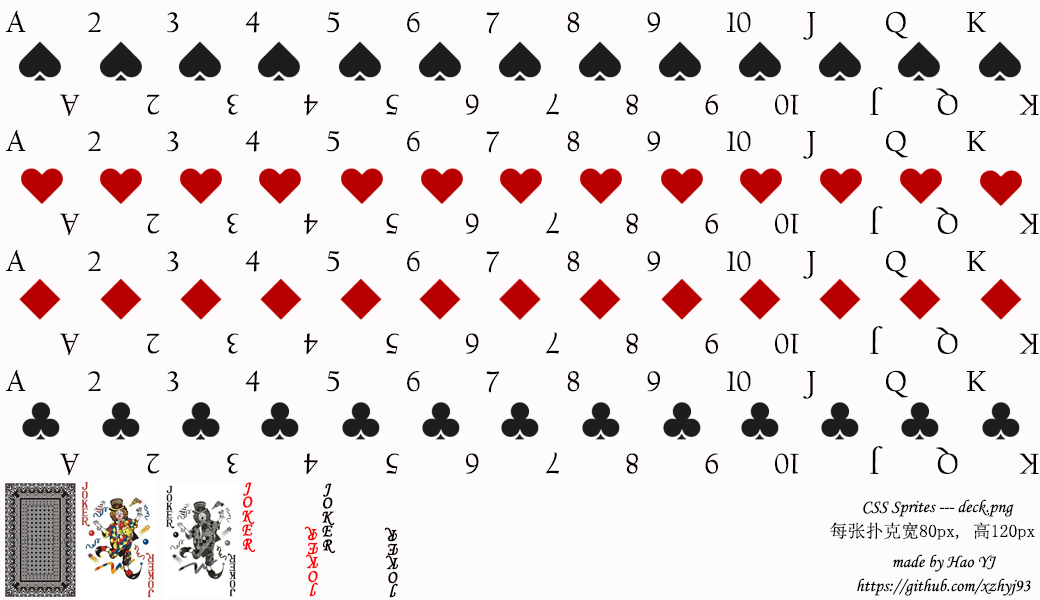
<style>
.page{position:relative;width:1040px;height:600px;background:#fefbfc}
.page>*{position:absolute;margin:0}
.t1{font:30px "CalifornianFB-Reg";color:#050000}
.t2{font:60px "Calibri-Light";color:#fefbfb}
.t3{font:18px/14px "MonotypeCorsiva";color:#fb020d;font-weight:bold;scale:0.89 1}
.t4{font:18px/14px "MonotypeCorsiva";color:#050000;font-weight:bold;scale:0.89 1}
.t5{font:17.9px/24px "MonotypeCorsiva";color:#000000}
.t6{font:17.9px/24px "SimSun";color:#000000}
.t7{font:18px/14px "MonotypeCorsiva";color:#fd0404;font-weight:bold;scale:0.89 1}
</style>
<div class="page">
<p class="t1" style="left:870px;top:87px;width:13px;height:28px;rotate:-179deg">J</p>
<p class="t1" style="left:936px;top:88px;width:22px;height:27px;rotate:-179deg">Q</p>
<p class="t1" style="left:60px;top:94px;width:20px;height:22px;rotate:-179deg">A</p>
<p class="t1" style="left:146px;top:94px;width:14px;height:21px;rotate:-179deg">2</p>
<p class="t1" style="left:227px;top:94px;width:12px;height:21px;rotate:-179deg">3</p>
<p class="t1" style="left:303px;top:94px;width:15px;height:22px;rotate:-179deg">4</p>
<p class="t1" style="left:386px;top:94px;width:13px;height:21px;rotate:-179deg">5</p>
<p class="t1" style="left:466px;top:94px;width:13px;height:21px;rotate:-179deg">6</p>
<p class="t1" style="left:546px;top:93px;width:13px;height:22px;rotate:-179deg">7</p>
<p class="t1" style="left:626px;top:94px;width:12px;height:21px;rotate:-179deg">8</p>
<p class="t1" style="left:705px;top:94px;width:13px;height:21px;rotate:-179deg">9</p>
<p class="t1" style="left:775px;top:94px;width:24px;height:21px;rotate:-179deg">10</p>
<p class="t1" style="left:1019px;top:94px;width:20px;height:21px;rotate:-179deg">K</p>
<p class="t1" style="left:886px;top:130px;width:32px;height:98px">Q<br><span class="t2">A</span></p>
<p class="t1" style="left:870px;top:206px;width:13px;height:28px;rotate:-179deg">J</p>
<p class="t1" style="left:936px;top:207px;width:22px;height:27px;rotate:-179deg">Q</p>
<p class="t1" style="left:60px;top:213px;width:20px;height:22px;rotate:-179deg">A</p>
<p class="t1" style="left:146px;top:213px;width:14px;height:21px;rotate:-179deg">2</p>
<p class="t1" style="left:227px;top:213px;width:12px;height:21px;rotate:-179deg">3</p>
<p class="t1" style="left:303px;top:213px;width:15px;height:22px;rotate:-179deg">4</p>
<p class="t1" style="left:386px;top:213px;width:13px;height:21px;rotate:-179deg">5</p>
<p class="t1" style="left:466px;top:213px;width:13px;height:21px;rotate:-179deg">6</p>
<p class="t1" style="left:546px;top:212px;width:13px;height:22px;rotate:-179deg">7</p>
<p class="t1" style="left:626px;top:213px;width:12px;height:21px;rotate:-179deg">8</p>
<p class="t1" style="left:705px;top:213px;width:13px;height:21px;rotate:-179deg">9</p>
<p class="t1" style="left:775px;top:213px;width:24px;height:21px;rotate:-179deg">10</p>
<p class="t1" style="left:1019px;top:213px;width:20px;height:21px;rotate:-179deg">K</p>
<p class="t1" style="left:727px;top:251px;width:32px;height:97px">10<br><span class="t2">A</span></p>
<p class="t1" style="left:886px;top:250px;width:32px;height:98px">Q<br><span class="t2">A</span></p>
<p class="t1" style="left:966px;top:251px;width:33px;height:97px">K<br><span class="t2">A</span></p>
<p class="t1" style="left:870px;top:326px;width:13px;height:28px;rotate:-179deg">J</p>
<p class="t1" style="left:936px;top:327px;width:22px;height:27px;rotate:-179deg">Q</p>
<p class="t1" style="left:60px;top:333px;width:20px;height:22px;rotate:-179deg">A</p>
<p class="t1" style="left:146px;top:333px;width:14px;height:21px;rotate:-179deg">2</p>
<p class="t1" style="left:227px;top:333px;width:12px;height:21px;rotate:-179deg">3</p>
<p class="t1" style="left:303px;top:333px;width:15px;height:22px;rotate:-179deg">4</p>
<p class="t1" style="left:386px;top:333px;width:13px;height:21px;rotate:-179deg">5</p>
<p class="t1" style="left:466px;top:333px;width:13px;height:21px;rotate:-179deg">6</p>
<p class="t1" style="left:546px;top:332px;width:13px;height:22px;rotate:-179deg">7</p>
<p class="t1" style="left:626px;top:333px;width:12px;height:21px;rotate:-179deg">8</p>
<p class="t1" style="left:705px;top:333px;width:13px;height:21px;rotate:-179deg">9</p>
<p class="t1" style="left:775px;top:333px;width:24px;height:21px;rotate:-179deg">10</p>
<p class="t1" style="left:1019px;top:333px;width:20px;height:21px;rotate:-179deg">K</p>
<p class="t1" style="left:870px;top:446px;width:13px;height:28px;rotate:-179deg">J</p>
<p class="t1" style="left:936px;top:447px;width:22px;height:27px;rotate:-179deg">Q</p>
<p class="t1" style="left:60px;top:453px;width:20px;height:22px;rotate:-179deg">A</p>
<p class="t1" style="left:146px;top:453px;width:14px;height:21px;rotate:-179deg">2</p>
<p class="t1" style="left:227px;top:453px;width:12px;height:21px;rotate:-179deg">3</p>
<p class="t1" style="left:303px;top:453px;width:15px;height:22px;rotate:-179deg">4</p>
<p class="t1" style="left:386px;top:453px;width:13px;height:21px;rotate:-179deg">5</p>
<p class="t1" style="left:466px;top:453px;width:13px;height:21px;rotate:-179deg">6</p>
<p class="t1" style="left:546px;top:452px;width:13px;height:22px;rotate:-179deg">7</p>
<p class="t1" style="left:626px;top:453px;width:12px;height:21px;rotate:-179deg">8</p>
<p class="t1" style="left:705px;top:453px;width:13px;height:21px;rotate:-179deg">9</p>
<p class="t1" style="left:775px;top:453px;width:24px;height:21px;rotate:-179deg">10</p>
<p class="t1" style="left:1019px;top:453px;width:20px;height:21px;rotate:-179deg">K</p>
<p class="t3" style="left:242px;top:482px;width:13px;height:71px;text-align:center">J<br>O<br>K<br>E<br>R</p>
<p class="t4" style="left:322px;top:483px;width:13px;height:71px;text-align:center">J<br>O<br>K<br>E<br>R</p>
<p class="t5" style="left:830px;top:499px;width:205px;height:41px;text-align:center">CSS Sprites --- deck.png<br><span class="t6">每张扑克宽80px, 高120px</span></p>
<p class="t7" style="left:304px;top:526px;width:15px;height:71px;text-align:center;rotate:179deg">J<br>O<br>K<br>E<br>R</p>
<p class="t4" style="left:384px;top:527px;width:15px;height:71px;text-align:center;rotate:179deg">J<br>O<br>K<br>E<br>R</p>
<p class="t5" style="left:857px;top:554px;width:174px;height:42px;text-align:center">made by Hao YJ<br>https://github.com/xzhyj93</p>
</div>
